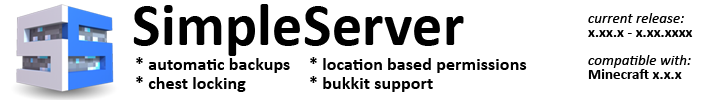
<style>
.page{position:relative;width:728px;height:100px;background:#ffffff}
.page>*{position:absolute;margin:0}
.t1{font:60px "Calibri-Bold";letter-spacing:0.005em;color:#000000}
.t2{font:30px "Calibri-Italic";letter-spacing:0.005em;color:#000000}
.t3{font:15px/14px "Calibri-Bold";letter-spacing:0.005em;color:#000000}
.t4{font:15px/14px "Calibri-Italic";letter-spacing:0.005em;color:#000000}
.t5{font:18px/18.5px "Calibri-Bold";letter-spacing:0.005em;color:#000000}
</style>
<div class="page">
<p class="t1" style="left:133px;top:4px;width:484px;height:52px">SimpleServer <span class="t2">contributor</span></p>
<p class="t3" style="left:588px;top:13px;width:105px;height:66px"><span class="t4">current release:</span><br>x.xx.x - x.xx.xxxx<br><br><span class="t4">compatible with:<br></span>Minecraft x.x.x</p>
<p class="t5" style="left:136px;top:57px;width:154px;height:35px">* automatic backups<br>* chest locking</p>
<p class="t5" style="left:310px;top:57px;width:217px;height:35px">* location based permissions<br>* bukkit support</p>
</div>
